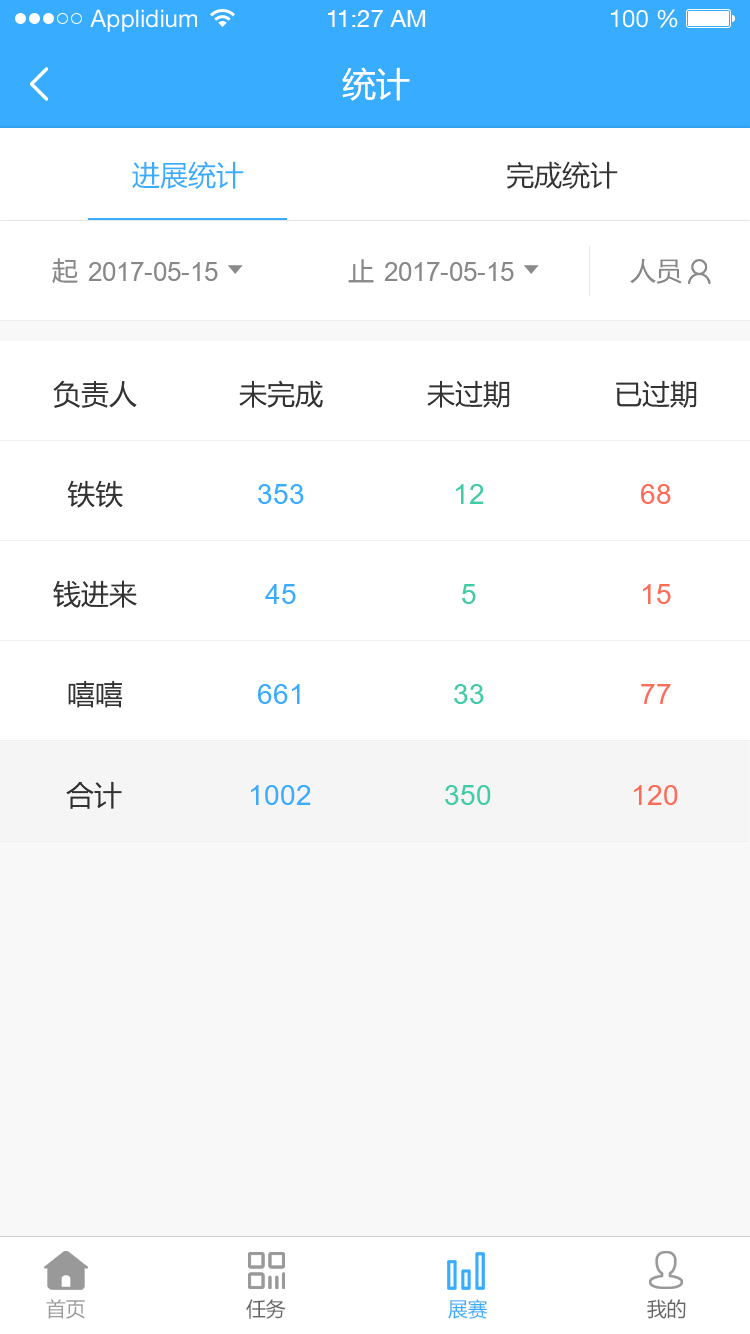
<style>
.page{position:relative;width:750px;height:1334px;background:#ffffff}
.page>*{position:absolute;margin:0}
.t1{font:24px "HelveticaNeueLTStd-Roman";color:#ffffff}
.t2{font:24px "HelveticaNeueCE-Roman";color:#ffffff}
.t3{font:34px "MicrosoftYaHei";color:#ffffff}
.t4{font:28px "MicrosoftYaHei";color:#38adff}
.t5{font:28px "MicrosoftYaHei";color:#333333}
.t6{font:26px "MicrosoftYaHei";color:#888888}
.t7{font:26px "ArialMT";color:#888888}
.t8{font:28px "ArialMT";color:#38adff}
.t9{font:28px "ArialMT";color:#3fcca7}
.t10{font:28px "ArialMT";color:#fd6c57}
.t11{font:20px "MicrosoftYaHei";color:#999999;text-transform:uppercase}
.t12{font:20px "MicrosoftYaHei";color:#666666;text-transform:uppercase}
.t13{font:20px "MicrosoftYaHei";color:#38adff;text-transform:uppercase}
</style>
<div class="page">
<p class="t1" style="left:90px;top:9px;width:107px;height:23px">Applidium</p>
<p class="t2" style="left:328px;top:10px;width:98px;height:17px">11:27 AM</p>
<p class="t1" style="left:611px;top:9px;width:67px;height:19px">100 %</p>
<p class="t3" style="left:342px;top:67px;width:68px;height:34px">统计</p>
<p class="t4" style="left:132px;top:161px;width:112px;height:28px">进展统计</p>
<p class="t5" style="left:506px;top:161px;width:112px;height:28px">完成统计</p>
<p class="t6" style="left:52px;top:258px;width:26px;height:26px">起</p>
<p class="t7" style="left:88px;top:262px;width:130px;height:19px">2017-05-15</p>
<p class="t6" style="left:348px;top:259px;width:26px;height:24px">止</p>
<p class="t7" style="left:384px;top:262px;width:130px;height:19px">2017-05-15</p>
<p class="t6" style="left:630px;top:258px;width:52px;height:26px">人员</p>
<p class="t5" style="left:53px;top:380px;width:84px;height:28px">负责人</p>
<p class="t5" style="left:239px;top:380px;width:84px;height:28px">未完成</p>
<p class="t5" style="left:427px;top:380px;width:83px;height:28px">未过期</p>
<p class="t5" style="left:616px;top:380px;width:81px;height:28px">已过期</p>
<p class="t5" style="left:67px;top:480px;width:56px;height:28px">铁铁</p>
<p class="t8" style="left:258px;top:484px;width:46px;height:20px">353</p>
<p class="t9" style="left:456px;top:484px;width:28px;height:20px">12</p>
<p class="t10" style="left:641px;top:484px;width:30px;height:20px">68</p>
<p class="t5" style="left:53px;top:580px;width:84px;height:28px">钱进来</p>
<p class="t8" style="left:265px;top:584px;width:31px;height:20px">45</p>
<p class="t9" style="left:462px;top:584px;width:14px;height:20px">5</p>
<p class="t10" style="left:643px;top:584px;width:28px;height:20px">15</p>
<p class="t5" style="left:68px;top:680px;width:55px;height:28px">嘻嘻</p>
<p class="t8" style="left:258px;top:684px;width:42px;height:20px">661</p>
<p class="t9" style="left:454px;top:684px;width:30px;height:20px">33</p>
<p class="t10" style="left:641px;top:684px;width:30px;height:20px">77</p>
<p class="t5" style="left:66px;top:781px;width:56px;height:28px">合计</p>
<p class="t8" style="left:251px;top:785px;width:60px;height:20px">1002</p>
<p class="t9" style="left:445px;top:785px;width:46px;height:20px">350</p>
<p class="t10" style="left:634px;top:785px;width:44px;height:20px">120</p>
<p class="t11" style="left:46px;top:1299px;width:39px;height:20px">首页</p>
<p class="t12" style="left:246px;top:1299px;width:40px;height:20px">任务</p>
<p class="t13" style="left:448px;top:1299px;width:40px;height:20px">展赛</p>
<p class="t12" style="left:647px;top:1299px;width:39px;height:20px">我的</p>
</div>
